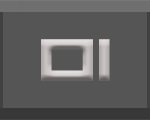
<style>
.page{position:relative;width:150px;height:120px;background:#555555}
.page>*{position:absolute;margin:0}
.t1{font:41.7px "ScifiAdventure"}
</style>
<div class="page">
<p class="t1" style="left:41px;top:39px;width:69px;height:42px">01</p>
</div>
